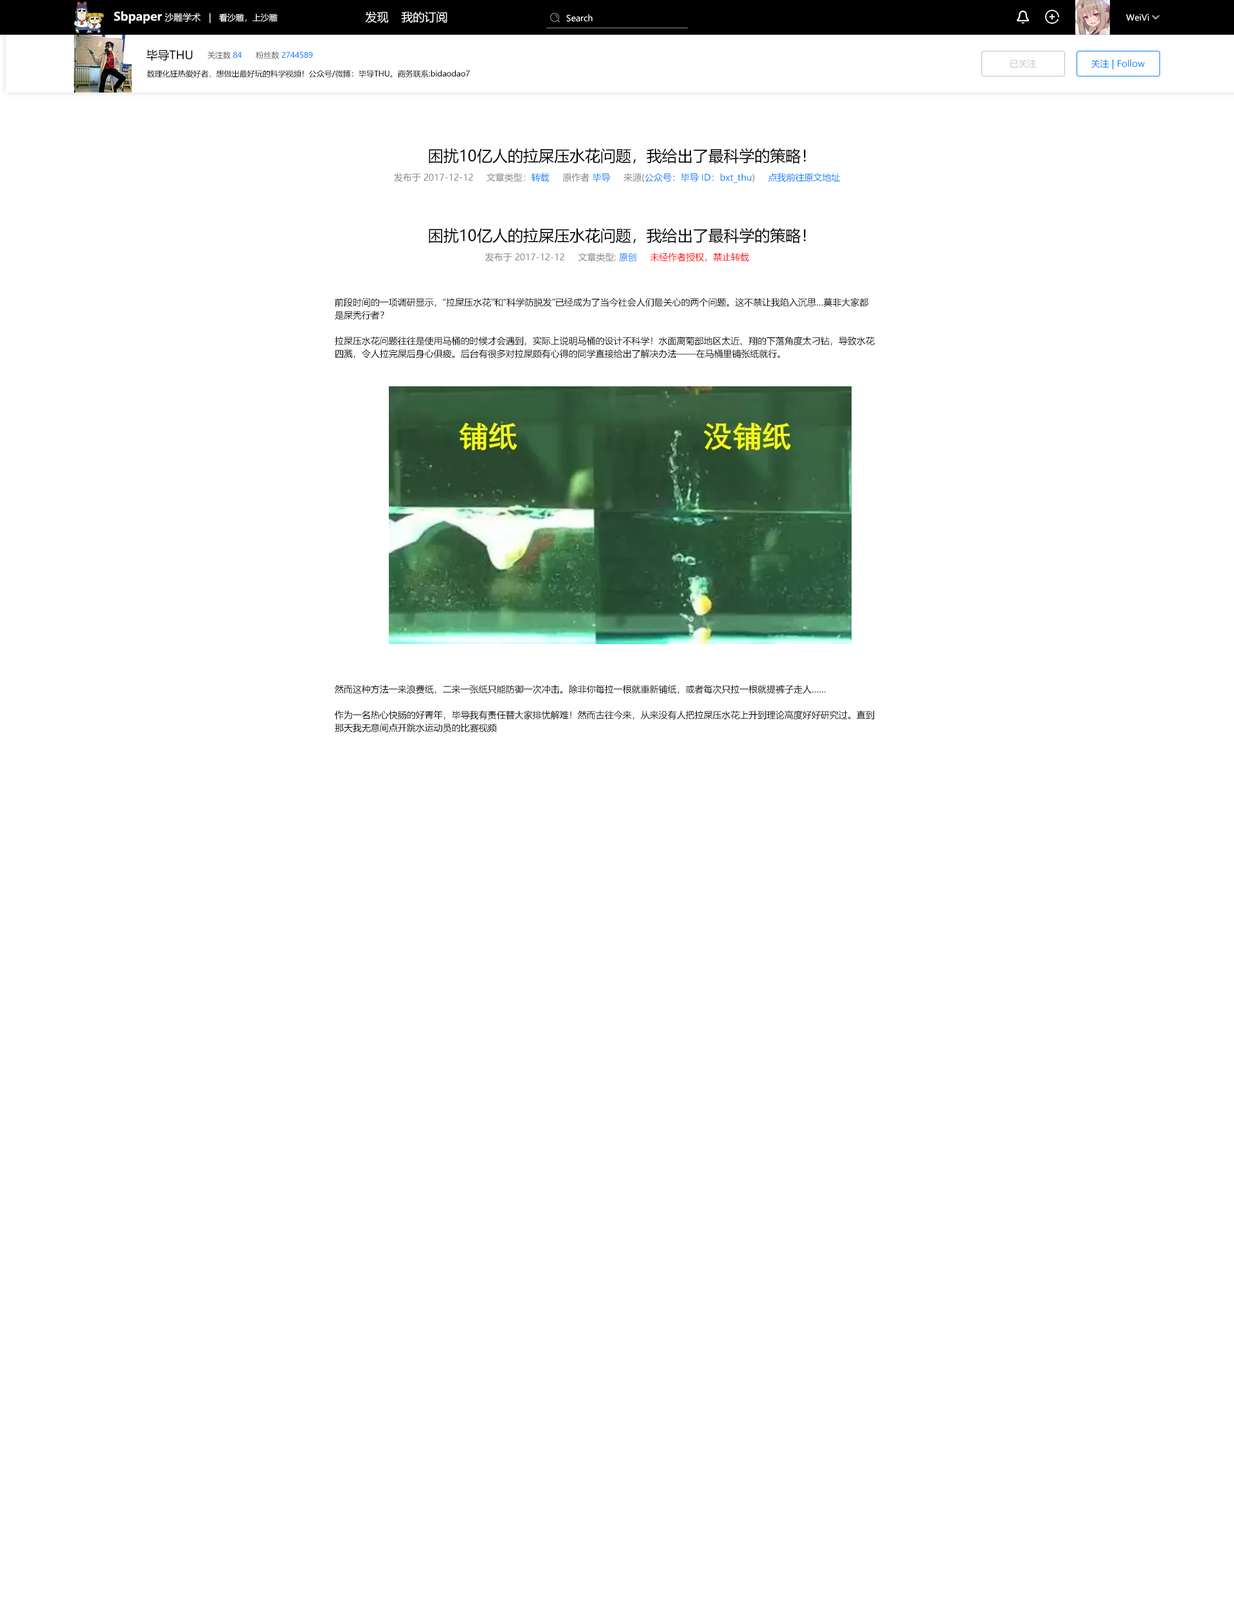
<style>
.page{position:relative;width:1234px;height:1607px;background:#ffffff}
.page>*{position:absolute;margin:0}
.t1{font:9px "MicrosoftYaHeiUI";color:#ffffff}
.t2{font:11.6px "MicrosoftYaHeiUI-Bold";color:#ffffff}
.t3{font:8.4px "MicrosoftYaHeiUI";color:#ffffff}
.t4{font:11.6px "MicrosoftYaHeiUI";color:#ffffff}
.t5{font:11.6px "MicrosoftYaHeiUI";color:#000000}
.t6{font:7.7px "MicrosoftYaHeiUI";color:#565656}
.t7{font:7.7px "MicrosoftYaHeiUI";color:#007eff}
.t8{font:9px "MicrosoftYaHeiUI";color:#c8c8c8}
.t9{font:9px "MicrosoftYaHeiUI";color:#007eff}
.t10{font:7.7px "MicrosoftYaHeiUI";color:#000000}
.t11{font:15.4px "MicrosoftYaHeiUI";color:#000000}
.t12{font:9px "MicrosoftYaHeiUI";color:#838383}
.t13{font:9px "MicrosoftYaHeiUI";color:#ff0000}
.t14{font:9px/12.9px "MicrosoftYaHeiUI";color:#000000}
</style>
<div class="page">
<p class="t1" style="left:114px;top:11px;width:164px;height:13px"><span class="t2">Sbpaper </span>沙雕学术   |   <span class="t3">看沙雕，上沙雕</span></p>
<p class="t4" style="left:365px;top:12px;width:24px;height:11px">发现</p>
<p class="t4" style="left:401px;top:12px;width:46px;height:11px">我的订阅</p>
<p class="t3" style="left:566px;top:14px;width:27px;height:8px">Search</p>
<p class="t3" style="left:1126px;top:14px;width:23px;height:7px">WeiVi</p>
<p class="t5" style="left:147px;top:50px;width:46px;height:11px">毕导THU</p>
<p class="t6" style="left:208px;top:51px;width:34px;height:8px">关注数 <span class="t7">84</span></p>
<p class="t7" style="left:256px;top:51px;width:57px;height:8px"><span class="t6">粉丝数 </span>2744589</p>
<p class="t8" style="left:1010px;top:59px;width:27px;height:9px">已关注</p>
<p class="t9" style="left:1092px;top:59px;width:53px;height:10px">关注 | Follow</p>
<p class="t10" style="left:147px;top:69px;width:323px;height:9px">数理化狂热爱好者，想做出最好玩的科学视频！公众号/微博：毕导THU。商务联系:bidaodao7</p>
<p class="t11" style="left:429px;top:148px;width:377px;height:16px">困扰10亿人的拉屎压水花问题，我给出了最科学的策略！</p>
<p class="t12" style="left:394px;top:173px;width:446px;height:10px">发布于 2017-12-12 文章类型：<span class="t9">转载</span>     原作者 <span class="t9">毕导</span>     来源(<span class="t9">公众号：毕导 ID：bxt_thu</span>)     <span class="t9">点我前往原文地址</span></p>
<p class="t11" style="left:429px;top:228px;width:377px;height:16px">困扰10亿人的拉屎压水花问题，我给出了最科学的策略！</p>
<p class="t12" style="left:485px;top:253px;width:265px;height:9px">发布于 2017-12-12     文章类型: <span class="t9">原创     </span><span class="t13">未经作者授权，禁止转载</span></p>
<p class="t14" style="left:335px;top:298px;width:540px;height:61px">前段时间的一项调研显示，“拉屎压水花”和“科学防脱发”已经成为了当今社会人们最关心的两个问题。这不禁让我陷入沉思…莫非大家都是屎秃行者？<br><br>拉屎压水花问题往往是使用马桶的时候才会遇到，实际上说明马桶的设计不科学！水面离菊部地区太近、翔的下落角度太刁钻，导致水花四溅，令人拉完屎后身心俱疲。后台有很多对拉屎颇有心得的同学直接给出了解决办法——在马桶里铺张纸就行。</p>
<p class="t14" style="left:334px;top:685px;width:540px;height:48px">然而这种方法一来浪费纸，二来一张纸只能防御一次冲击。除非你每拉一根就重新铺纸，或者每次只拉一根就提裤子走人……<br><br>作为一名热心快肠的好青年，毕导我有责任替大家排忧解难！然而古往今来，从来没有人把拉屎压水花上升到理论高度好好研究过。直到那天我无意间点开跳水运动员的比赛视频</p>
</div>
